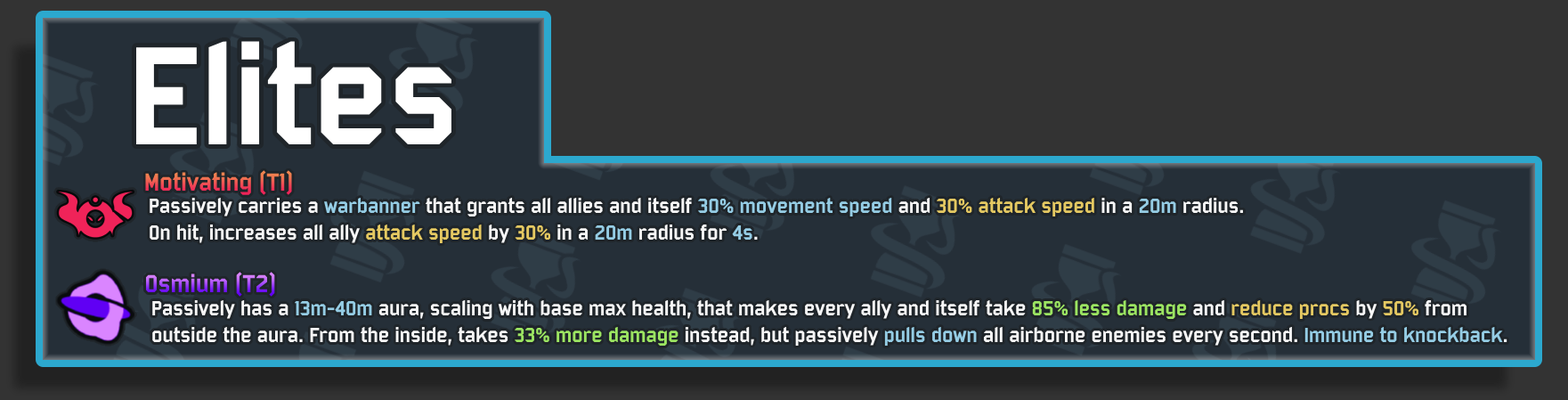
<style>
.page{position:relative;width:1568px;height:400px;background:#333333}
.page>*{position:absolute;margin:0}
.t1{font:151.4px "Bombardier";color:#ffffff}
.t2{font:26.7px "Bombardier"}
.t3{font:22.3px "Bombardier";color:#f7f7f7}
.t4{font:22.3px "Bombardier";color:#95cde5}
.t5{font:22.3px "Bombardier";color:#e5c962}
.t6{font:22.3px "Bombardier";color:#9ce562}
</style>
<div class="page">
<p class="t1" style="left:136px;top:41px;width:315px;height:103px">Elites</p>
<p class="t2" style="left:145px;top:170px;width:147px;height:25px">Motivating (T1)</p>
<p class="t3" style="left:150px;top:198px;width:1093px;height:45px">Passively carries a <span class="t4">warbanner</span> that grants all allies and itself <span class="t4">30% movement speed </span>and <span class="t5">30% attack speed</span> in a <span class="t4">20m</span> radius. <br>On hit, increases all ally<span class="t5"> attack speed</span> by <span class="t5">30%</span> in a <span class="t4">20m</span> radius for <span class="t4">4s</span>.</p>
<p class="t2" style="left:146px;top:272px;width:129px;height:25px">Osmium (T2)</p>
<p class="t3" style="left:152px;top:300px;width:1355px;height:46px">Passively has a <span class="t4">13m-40m</span> aura, scaling with base max health, that makes every ally and itself take <span class="t6">85% less damage</span> and <span class="t5">reduce procs</span> by <span class="t5">50%</span> from<br>outside the aura. From the inside, takes <span class="t6">33% more damage</span> instead, but passively <span class="t4">pulls down</span> all airborne enemies every second.<span class="t4"> Immune to knockback</span>.</p>
</div>
